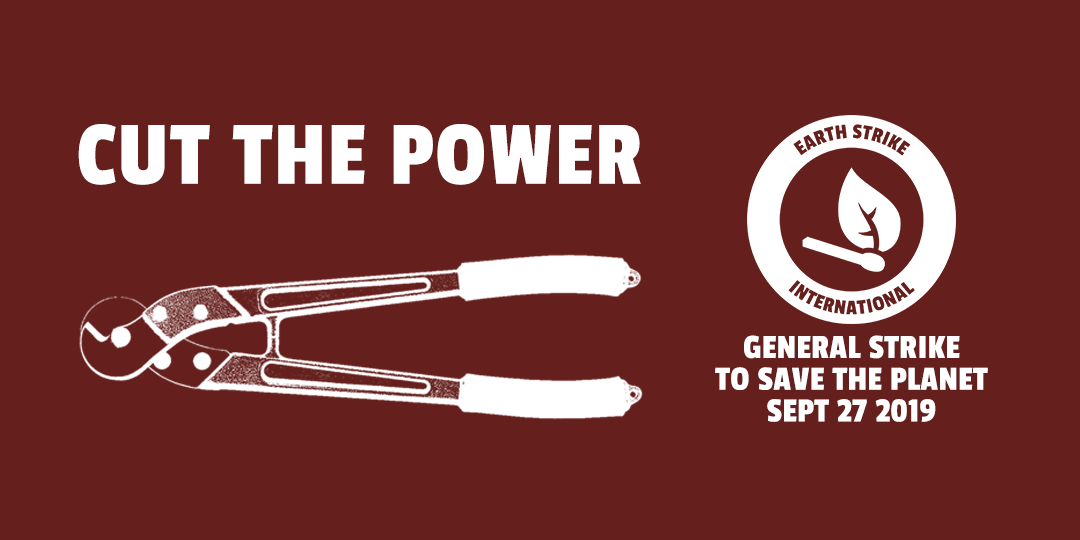
<style>
.page{position:relative;width:1080px;height:540px;background:#65201d}
.page>*{position:absolute;margin:0}
.t1{font:94.8px "PassionOne-Regular";letter-spacing:0.02em;color:#ffffff;text-transform:uppercase}
.t2{font:35.6px/31.7px "PassionOne-Regular";letter-spacing:0.01em;color:#ffffff}
</style>
<div class="page">
<p class="t1" style="left:78px;top:124px;width:563px;height:61px">CUT THE POWER</p>
<p class="t2" style="left:715px;top:335px;width:273px;height:87px;text-align:center">GENERAL STRIKE<br>TO SAVE THE PLANET<br>SEPT 27 2019</p>
</div>
